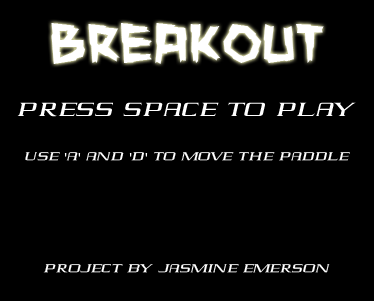
<style>
.page{position:relative;width:374px;height:301px;background:#000000}
.page>*{position:absolute;margin:0}
.t1{font:60px "ManEaterBB";color:#ffffff}
.t2{font:14px/14px "Elektra-Regular";color:#ffffff}
.t3{font:24px/14px "Elektra-Regular";color:#ffffff}
.t4{font:14px/14px "MyriadPro-Regular";color:#ffffff}
</style>
<div class="page">
<p class="t1" style="left:51px;top:23px;width:273px;height:41px">Breakout</p>
<p class="t2" style="left:17px;top:102px;width:339px;height:171px;text-align:center"><span class="t3">press space to play<br><br></span><br>use <span class="t4">'</span>a<span class="t4">'</span> and <span class="t4">'</span>d<span class="t4">'</span> to move the paddle<br><br><br><br><br><br><br><br>project by jasmine emerson</p>
</div>
